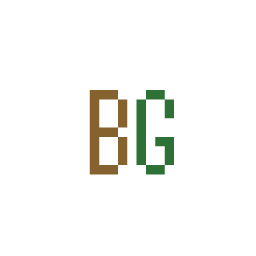
<style>
.page{position:relative;width:256px;height:256px;background:#ffffff}
.page>*{position:absolute;margin:0}
.t1{font:120px "Terminal";color:#86622e}
.t2{font:120px "Terminal";color:#2d7136}
</style>
<div class="page">
<p class="t1" style="left:89px;top:90px;width:85px;height:85px">B<span class="t2">G</span></p>
</div>
